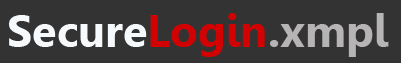
<style>
.page{position:relative;width:401px;height:63px;background:#333333}
.page>*{position:absolute;margin:0}
.t1{font:45px "Leelawadee-Bold";color:#f7fafc}
.t2{font:45px "Leelawadee-Bold";color:#d20202}
.t3{font:45px "Leelawadee-Bold";color:#b6b4b4}
</style>
<div class="page">
<p class="t1" style="left:9px;top:13px;width:380px;height:44px">Secure<span class="t2">Login</span><span class="t3">.xmpl</span></p>
</div>
